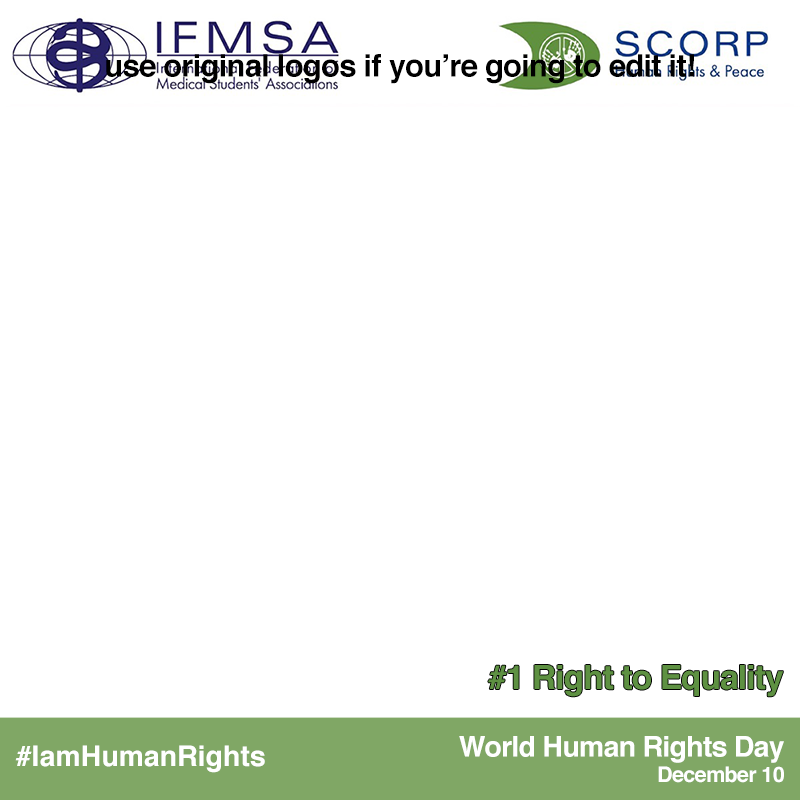
<style>
.page{position:relative;width:800px;height:800px;background:#ffffff}
.page>*{position:absolute;margin:0}
.t1{font:31px "Helvetica-Bold";letter-spacing:-0.025em;color:#000000}
.t2{font:33.3px "Helvetica-Bold";letter-spacing:-0.025em;color:#5e9142}
.t3{font:28.4px "Helvetica-Bold";letter-spacing:-0.025em;color:#ffffff}
.t4{font:21.3px "Helvetica-Bold";letter-spacing:-0.025em;color:#ffffff}
.t5{font:28.4px "Helvetica-Bold";color:#ffffff}
</style>
<div class="page">
<p class="t1" style="left:106px;top:54px;width:588px;height:30px">use original logos if you’re going to edit it!</p>
<p class="t2" style="left:488px;top:665px;width:295px;height:32px">#1 Right to Equality</p>
<p class="t3" style="left:459px;top:736px;width:325px;height:47px;text-align:right">World Human Rights Day<br><span class="t4">December 10</span></p>
<p class="t5" style="left:15px;top:745px;width:250px;height:28px">#IamHumanRights</p>
</div>
